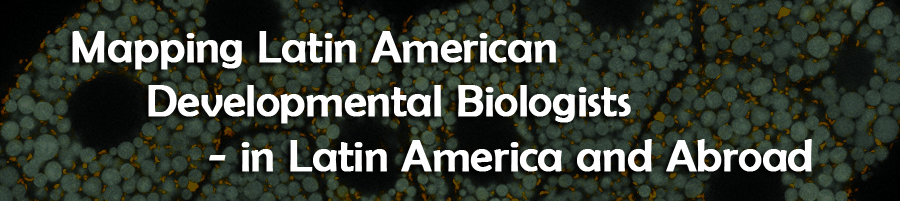
<style>
.page{position:relative;width:900px;height:201px}
.page>*{position:absolute;margin:0}
.t1{font:45.4px "BerlinSansFB-Reg";color:#fffefe;font-weight:bold}
</style>
<div class="page">
<p class="t1" style="left:72px;top:31px;width:740px;height:141px">Mapping Latin American <br>      Developmental Biologists <br>           - in Latin America and Abroad</p>
</div>
